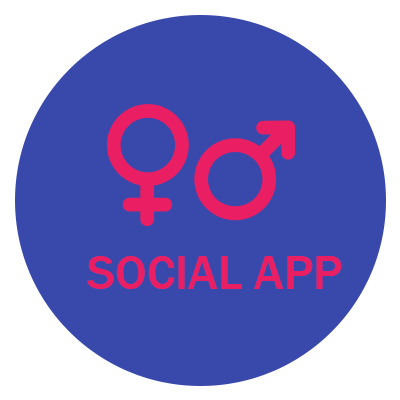
<style>
.page{position:relative;width:400px;height:400px;background:#3949ab}
.page>*{position:absolute;margin:0}
.t1{font:49px "FranklinGothic-Medium";color:#e91e63;text-transform:uppercase}
</style>
<div class="page">
<p class="t1" style="left:87px;top:256px;width:255px;height:33px">sOCIAL aPP</p>
</div>
